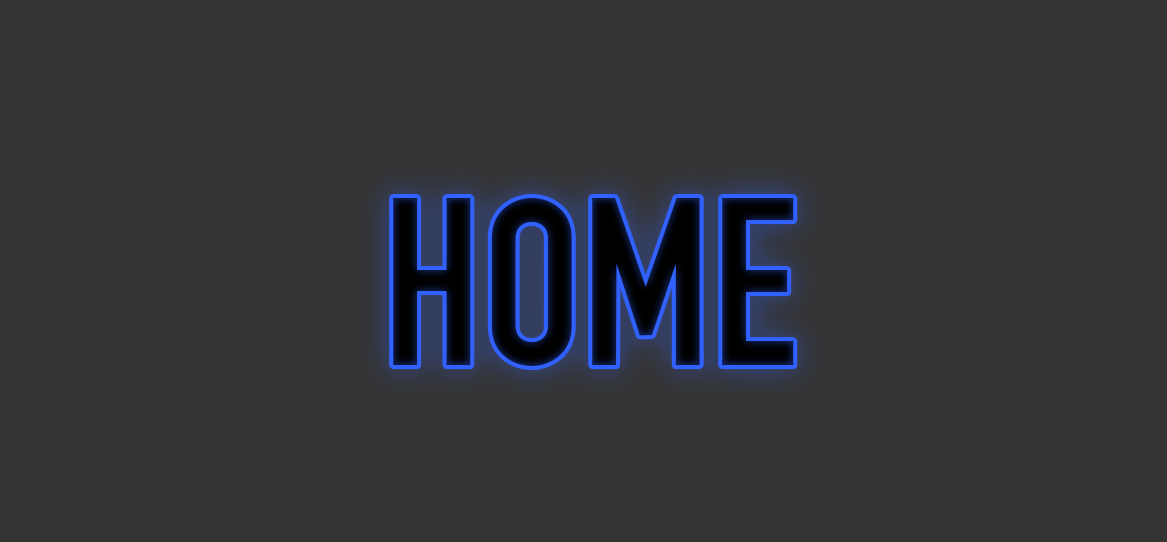
<style>
.page{position:relative;width:1167px;height:542px;background:#333333}
.page>*{position:absolute;margin:0}
.t1{font:233.7px "DINEngschrift";color:#02040a}
</style>
<div class="page">
<p class="t1" style="left:393px;top:198px;width:401px;height:168px">HOME</p>
</div>
